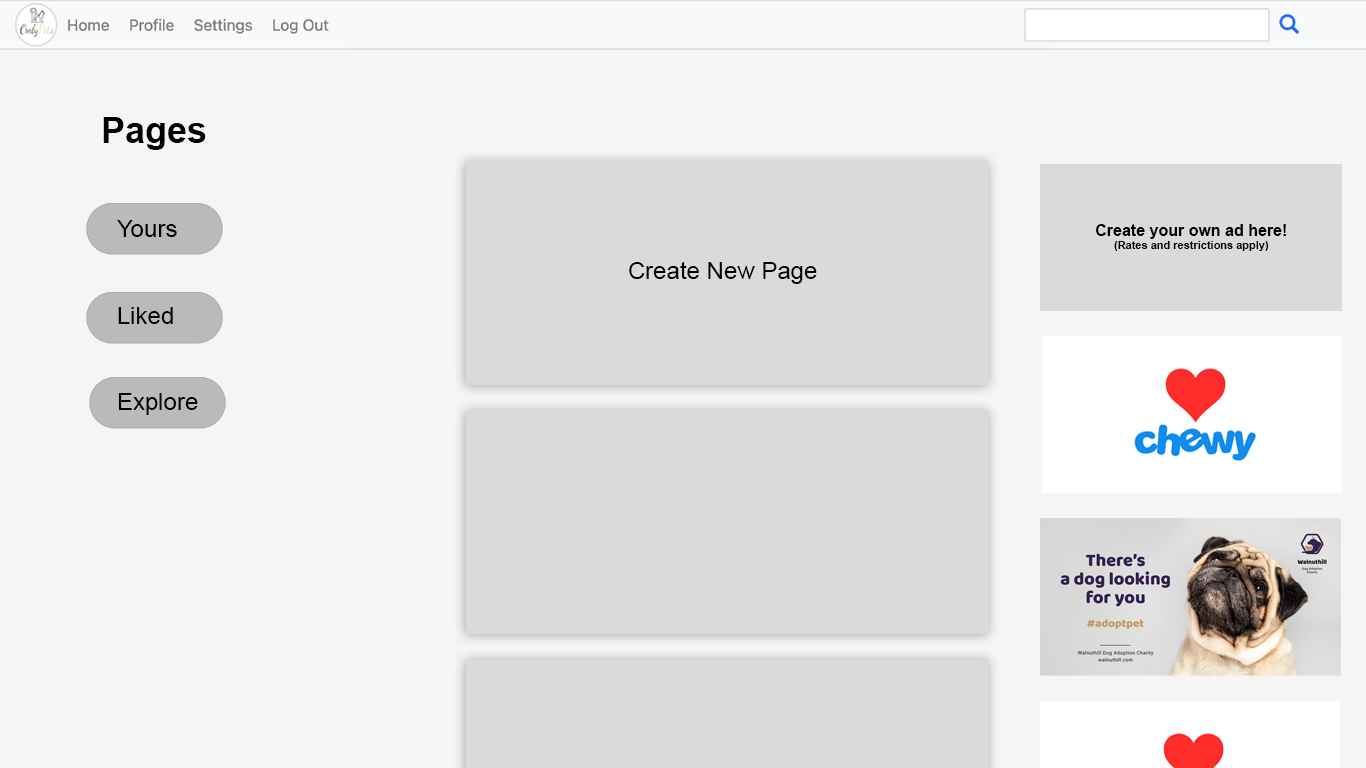
<style>
.page{position:relative;width:1366px;height:768px;background:#f5f5f5}
.page>*{position:absolute;margin:0}
.t1{font:36px "Arial-BoldMT";color:#020202}
.t2{font:24px "ArialMT";color:#020202}
.t3{font:11px "Arial-BoldMT";color:#000000}
.t4{font:16px "Arial-BoldMT";color:#000000}
</style>
<div class="page">
<p class="t1" style="left:103px;top:117px;width:103px;height:33px">Pages</p>
<p class="t2" style="left:117px;top:220px;width:81px;height:195px">Yours<br><br><br>Liked<br><br><br>Explore</p>
<p class="t3" style="left:1096px;top:224px;width:190px;height:27px;text-align:center"><span class="t4">Create your own ad here!<br></span>(Rates and restrictions apply)</p>
<p class="t2" style="left:629px;top:261px;width:188px;height:23px">Create New Page</p>
</div>
